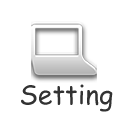
<style>
.page{position:relative;width:128px;height:128px;background:#ffffff}
.page>*{position:absolute;margin:0}
.t1{font:26.8px "ComicSansMS";color:#323232}
</style>
<div class="page">
<p class="t1" style="left:21px;top:84px;width:92px;height:28px">Setting</p>
</div>
